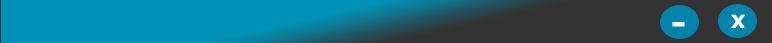
<style>
.page{position:relative;width:772px;height:43px;background:#0092b6}
.page>*{position:absolute;margin:0}
.t1{font:18px "Verdana-Bold";color:#ffffff;scale:1.05 1}
.t2{font:30px "Verdana-Bold";color:#ffffff;scale:1.05 1}
</style>
<div class="page">
<p class="t1" style="left:731px;top:14px;width:15px;height:14px">X</p>
<p class="t2" style="left:672px;top:22px;width:13px;height:5px">-</p>
</div>
